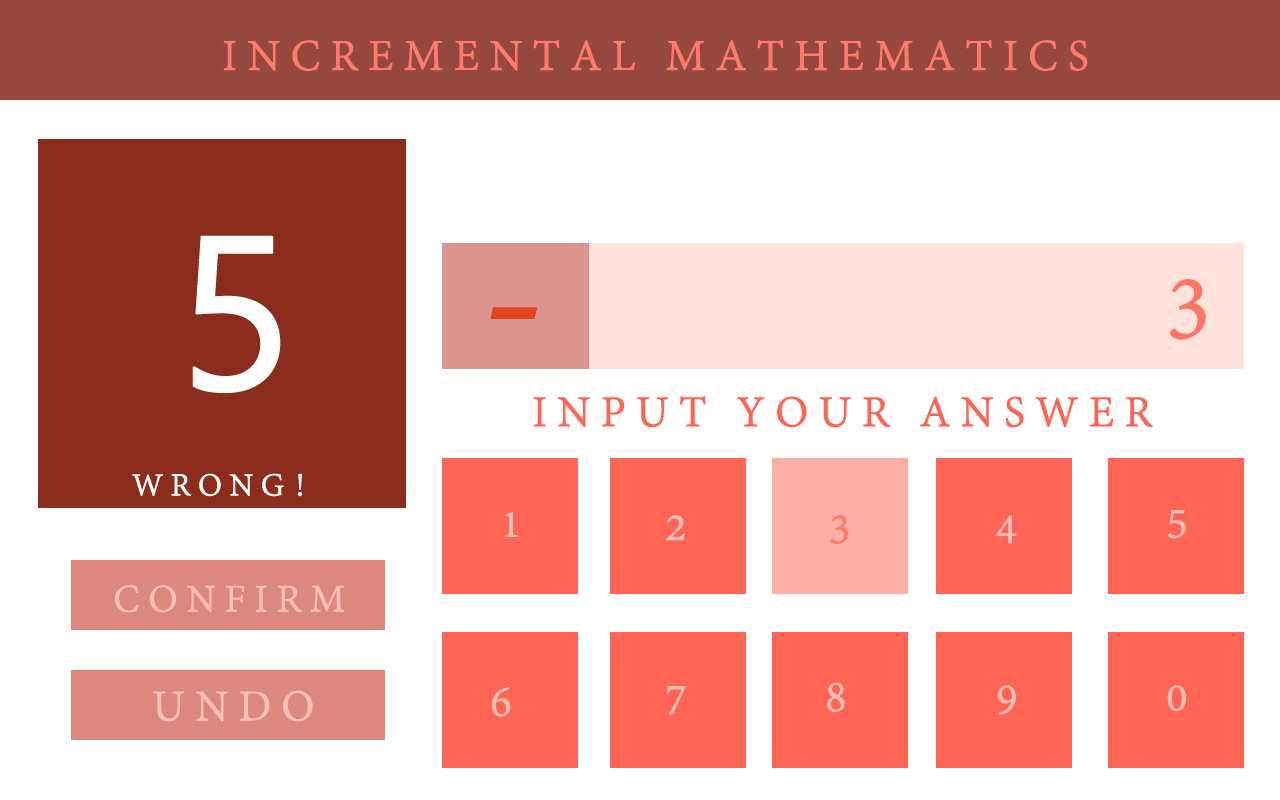
<style>
.page{position:relative;width:1280px;height:800px;background:#ffffff}
.page>*{position:absolute;margin:0}
.t1{font:48px "AdobeDevanagari-Regular";letter-spacing:0.2em;color:#ff7a6b;text-transform:uppercase;font-weight:bold}
.t2{font:217.4px "Ebrima";letter-spacing:0.2em;color:#ffffff;font-weight:bold}
.t3{font:100px "AdobeDevanagari-Regular";letter-spacing:0.2em;color:#ff7566;text-transform:uppercase;font-weight:bold}
.t4{font:200px "AdobeDevanagari-Regular";letter-spacing:0.2em;color:#e34520;text-transform:uppercase;font-weight:bold}
.t5{font:48px "AdobeDevanagari-Regular";letter-spacing:0.2em;color:#ff6554;text-transform:uppercase;font-weight:bold}
.t6{font:34.8px "AdobeDevanagari-Regular";letter-spacing:0.2em;color:#ffffff;text-transform:uppercase;font-weight:bold}
.t7{font:48px "AdobeDevanagari-Regular";letter-spacing:0.2em;color:#ffbfb8;text-transform:uppercase;font-weight:bold}
.t8{font:42.3px "AdobeDevanagari-Regular";letter-spacing:0.2em;color:#ffbfb8;text-transform:uppercase;font-weight:bold}
</style>
<div class="page">
<p class="t1" style="left:223px;top:39px;width:865px;height:32px">Incremental Mathematics</p>
<p class="t2" style="left:192px;top:235px;width:89px;height:158px">5</p>
<p class="t3" style="left:1170px;top:279px;width:36px;height:61px">3</p>
<p class="t4" style="left:490px;top:307px;width:47px;height:12px">-</p>
<p class="t5" style="left:533px;top:396px;width:620px;height:32px">Input your Answer</p>
<p class="t6" style="left:132px;top:473px;width:170px;height:24px">wrong!</p>
<p class="t7" style="left:1168px;top:510px;width:18px;height:29px">5</p>
<p class="t7" style="left:505px;top:512px;width:13px;height:25px">1</p>
<p class="t7" style="left:666px;top:515px;width:19px;height:26px">2</p>
<p class="t1" style="left:830px;top:515px;width:18px;height:30px">3</p>
<p class="t7" style="left:996px;top:515px;width:21px;height:29px">4</p>
<p class="t8" style="left:114px;top:585px;width:231px;height:28px">Confirm</p>
<p class="t7" style="left:491px;top:687px;width:20px;height:30px">6</p>
<p class="t7" style="left:667px;top:686px;width:19px;height:29px">7</p>
<p class="t7" style="left:827px;top:682px;width:18px;height:30px">8</p>
<p class="t7" style="left:997px;top:685px;width:19px;height:30px">9</p>
<p class="t7" style="left:1167px;top:685px;width:19px;height:26px">0</p>
<p class="t7" style="left:153px;top:690px;width:160px;height:32px">Undo</p>
</div>
